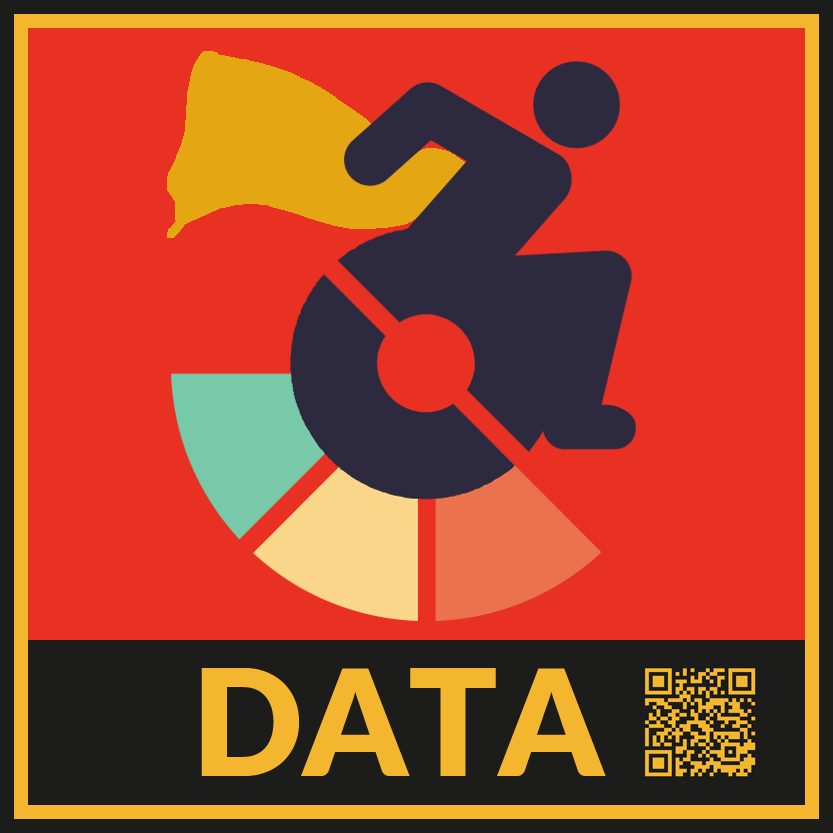
<style>
.page{position:relative;width:833px;height:833px;background:#e83023}
.page>*{position:absolute;margin:0}
.t1{font:146.5px "Lato-Black";color:#f3b62e}
</style>
<div class="page">
<p class="t1" style="left:201px;top:668px;width:405px;height:108px">DATA</p>
</div>
